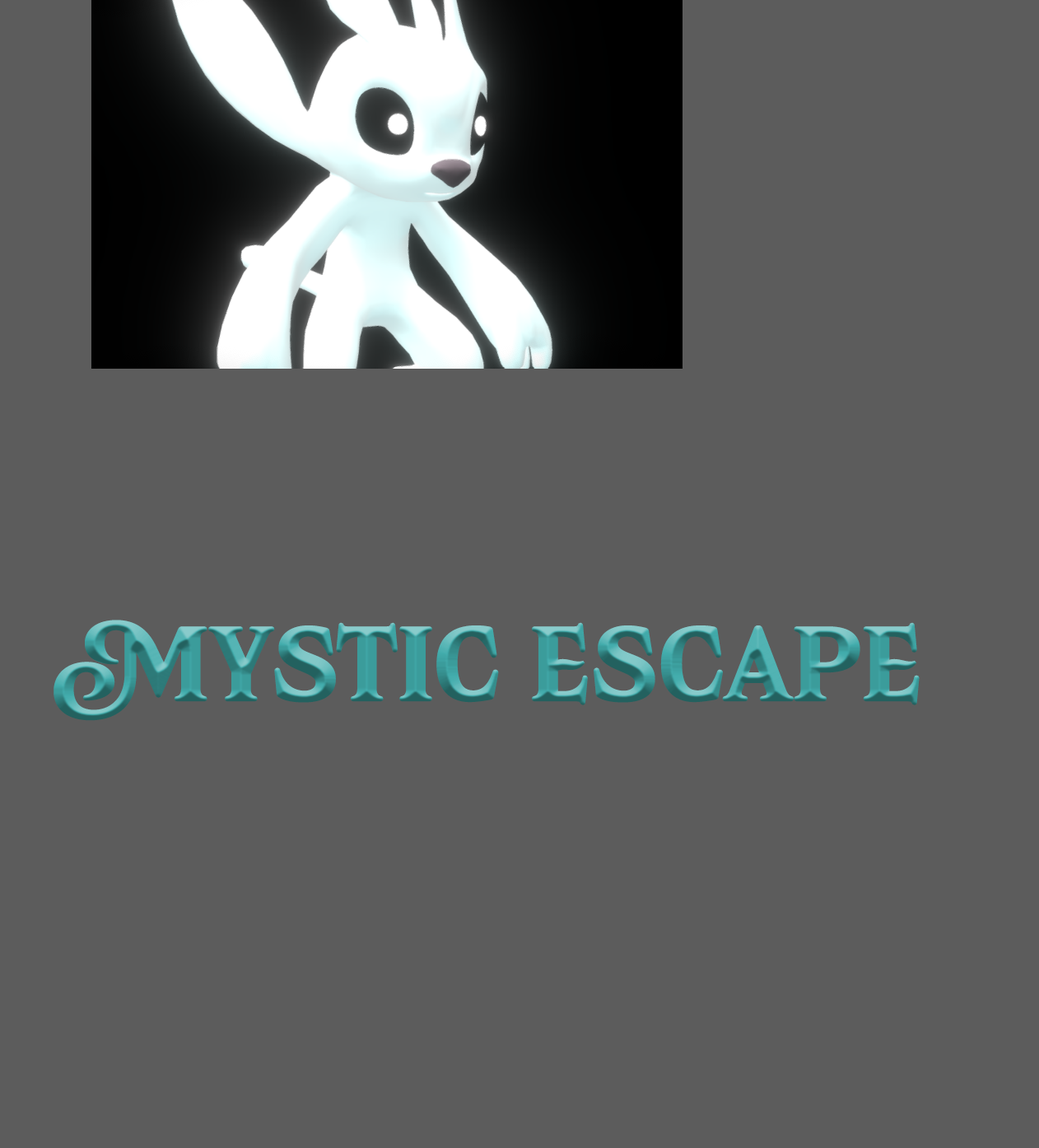
<style>
.page{position:relative;width:1039px;height:1148px;background:#5c5c5c}
.page>*{position:absolute;margin:0}
.t1{font:102.9px "JunigardenSerifPERSONALUSE-Regular";text-transform:uppercase;font-weight:bold}
.t2{font:102.9px "JunigardenSerifPERSONALUSE-Regular";font-weight:bold}
</style>
<div class="page">
<p class="t1" style="left:53px;top:620px;width:866px;height:101px"><span class="t2">M</span>YSTIC ESCAPE</p>
</div>
